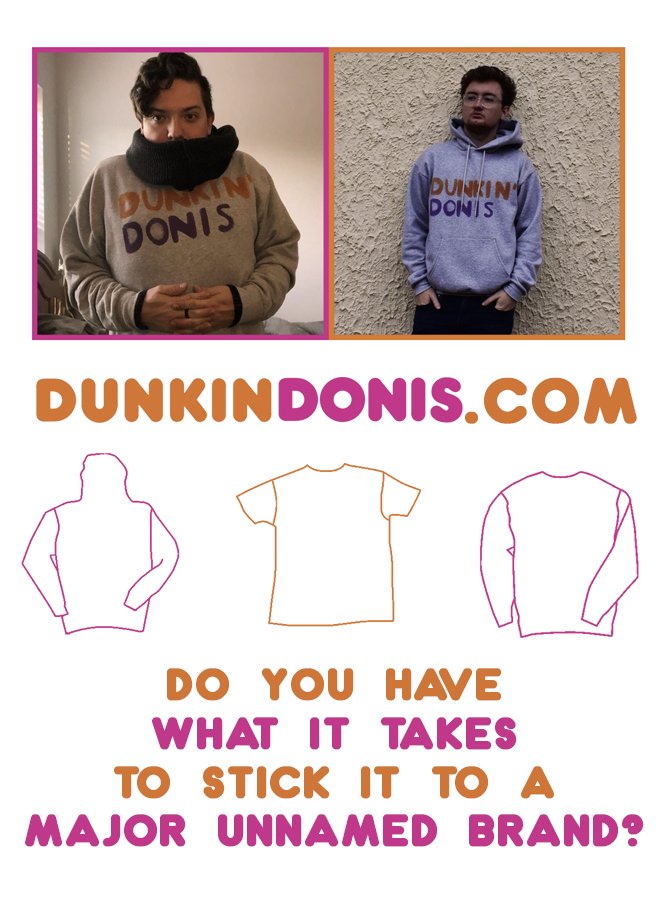
<style>
.page{position:relative;width:657px;height:905px;background:#ffffff}
.page>*{position:absolute;margin:0}
.t1{font:58px "Dunkin";color:#ce7638;font-weight:bold}
.t2{font:40.7px "Dunkin";color:#bf3889;text-transform:uppercase;font-weight:bold}
.t3{font:40.7px "Dunkin";color:#ce7638;text-transform:uppercase;font-weight:bold}
</style>
<div class="page">
<p class="t1" style="left:465px;top:377px;width:172px;height:47px">.COM</p>
<p class="t2" style="left:25px;top:668px;width:619px;height:179px;text-align:center"><span class="t3">do you have<br></span>what it takes<br><span class="t3">to stick it to a<br></span>major unnamed brand?</p>
</div>
